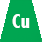
<style>
.page{position:relative;width:42px;height:42px;background:#00a651}
.page>*{position:absolute;margin:0}
.t1{font:20px "AbadiMT-CondensedExtraBold";color:#ffffff}
</style>
<div class="page">
<p class="t1" style="left:12px;top:14px;width:18px;height:14px">Cu</p>
</div>
